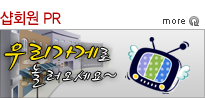
<style>
.page{position:relative;width:205px;height:98px;background:#ffffff}
.page>*{position:absolute;margin:0}
.t1{font:15.9px "YDIYGO330";letter-spacing:-0.025em;color:#b60000;scale:0.91 1}
.t2{font:10px "ArialMT";color:#424242}
.t3{font:24px/20px "SJSoju1";letter-spacing:-0.05em;color:#ffffff}
.t4{font:39px/20px "SJSoju1";letter-spacing:-0.05em;color:#ffe400}
</style>
<div class="page">
<p class="t1" style="left:0px;top:11px;width:61px;height:15px">샵회원 PR</p>
<p class="t2" style="left:163px;top:19px;width:22px;height:5px">more</p>
<p class="t3" style="left:4px;top:42px;width:112px;height:46px;text-align:right"><span class="t4">우리가게</span>로 <br>놀러오세요~</p>
</div>
